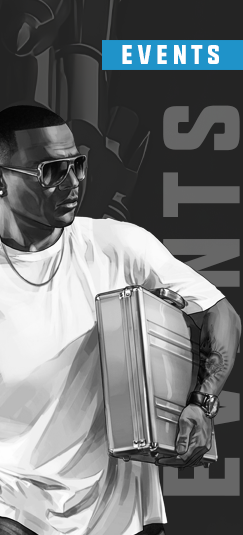
<style>
.page{position:relative;width:243px;height:535px}
.page>*{position:absolute;margin:0}
.t1{font:27px "UpboltersNew";letter-spacing:0.18em;color:#ffffff;text-transform:uppercase}
</style>
<div class="page">
<p class="t1" style="left:122px;top:45px;width:97px;height:19px">Events</p>
</div>
